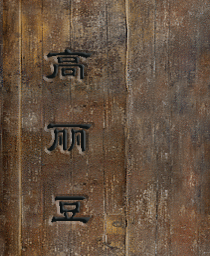
<style>
.page{position:relative;width:210px;height:256px}
.page>*{position:absolute;margin:0}
.t1{font:48px "Á¥Êé-Regular";color:#101515}
</style>
<div class="page">
<p class="t1" style="left:45px;top:49px;width:48px;height:175px">高 丽 豆</p>
</div>
